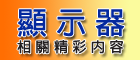
<style>
.page{position:relative;width:140px;height:60px}
.page>*{position:absolute;margin:0}
.t1{font:14px/30px "LinGothic-Bold";letter-spacing:0.32em;color:#231f20}
.t2{font:30px/30px "LinGothic-Bold";letter-spacing:0.3em;color:#05299e}
</style>
<div class="page">
<p class="t1" style="left:17px;top:9px;width:108px;height:45px"><span class="t2">顯示器<br></span>相關精彩內容</p>
</div>
